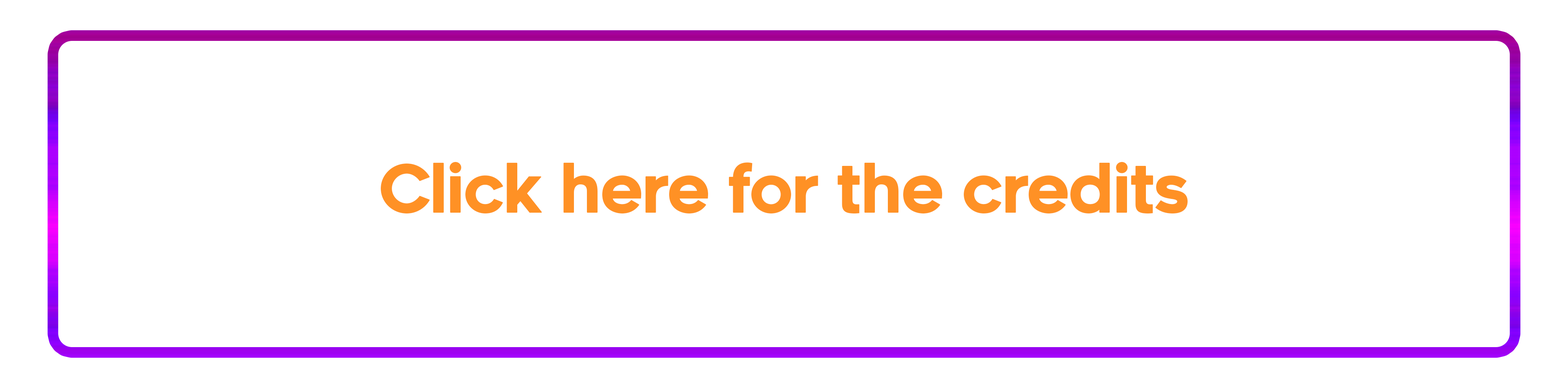
<style>
.page{position:relative;width:1568px;height:388px;background:#ffffff}
.page>*{position:absolute;margin:0}
.t1{font:65px "Renogare-Regular";letter-spacing:-0.05em;color:#ff9125;font-weight:bold}
</style>
<div class="page">
<p class="t1" style="left:381px;top:162px;width:807px;height:52px">Click here for the credits</p>
</div>
